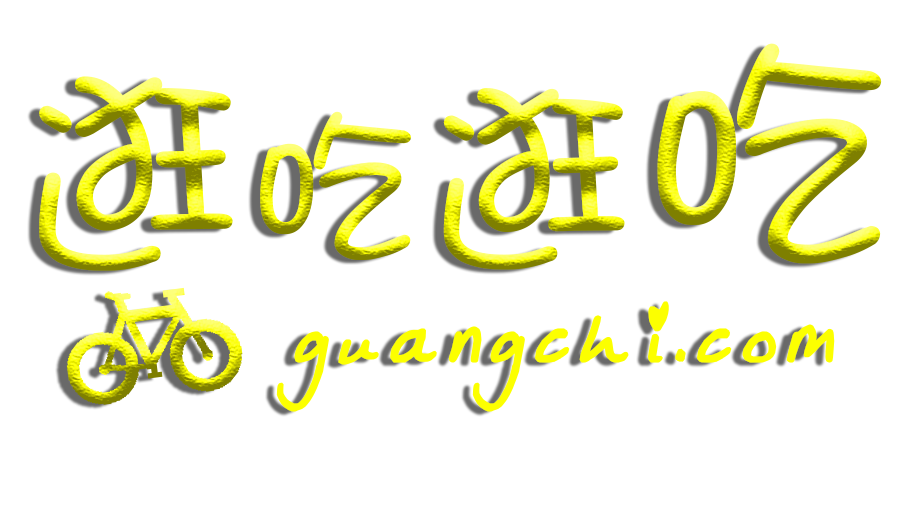
<style>
.page{position:relative;width:900px;height:506px;background:#ffffff}
.page>*{position:absolute;margin:0}
.t1{font:228px "DFPShaoNvW5"}
.t2{font:178px "DFPShaoNvW5"}
.t3{font:213px "DFPShaoNvW5"}
.t4{font:264px "DFPShaoNvW5"}
.t5{font:117px "Julies";letter-spacing:0.1em;color:#fcff00;font-weight:bold;font-style:italic;scale:0.91 1}
</style>
<div class="page">
<p class="t1" style="left:39px;top:43px;width:843px;height:228px">逛<span class="t2">吃</span><span class="t3">逛</span><span class="t4">吃</span></p>
<p class="t5" style="left:276px;top:301px;width:559px;height:111px">guangchi.com</p>
</div>
